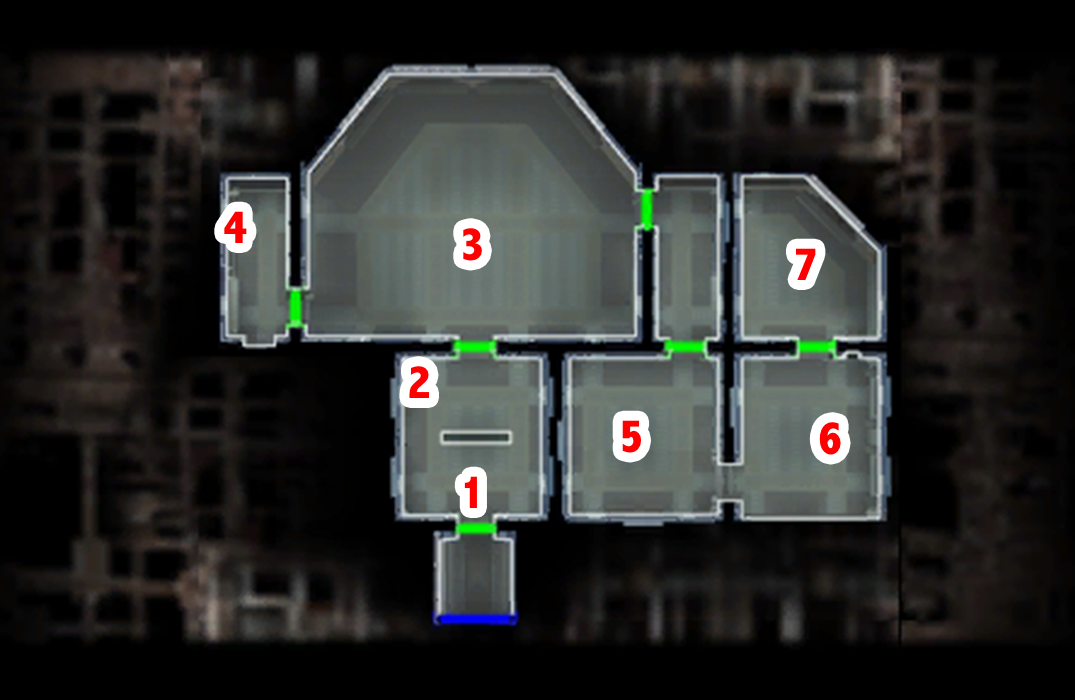
<style>
.page{position:relative;width:1075px;height:700px;background:#000000}
.page>*{position:absolute;margin:0}
.t1{font:48px "AbadiMT-CondensedExtraBold";color:#ff0000}
</style>
<div class="page">
<p class="t1" style="left:224px;top:211px;width:23px;height:32px">4</p>
<p class="t1" style="left:463px;top:228px;width:19px;height:33px">3</p>
<p class="t1" style="left:796px;top:248px;width:20px;height:32px">7</p>
<p class="t1" style="left:409px;top:366px;width:20px;height:32px">2</p>
<p class="t1" style="left:622px;top:420px;width:19px;height:33px">5</p>
<p class="t1" style="left:819px;top:422px;width:22px;height:33px">6</p>
<p class="t1" style="left:464px;top:476px;width:13px;height:32px">1</p>
</div>
